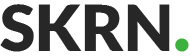
<style>
.page{position:relative;width:190px;height:56px;background:#ffffff}
.page>*{position:absolute;margin:0}
.t1{font:64px "Lato-Black";color:#272727}
.t2{font:74.6px "Lato-Black";color:#3db13d}
</style>
<div class="page">
<p class="t1" style="left:0px;top:4px;width:189px;height:48px">SKRN<span class="t2">.</span></p>
</div>
